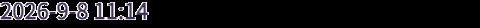
<style>
.page{position:relative;width:480px;height:28px;background:#000000}
.page>*{position:absolute;margin:0}
.t1{font:22px "WebPSD-18463539-0-Regular";color:#3f3254;font-weight:bold}
</style>
<div class="page">
<p class="t1" style="left:0px;top:0px;width:480px;height:28px">2026-9-8 11:14</p>
</div>
